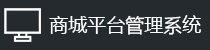
<style>
.page{position:relative;width:210px;height:50px;background:#252a2f}
.page>*{position:absolute;margin:0}
.t1{font:19px "MicrosoftYaHei";color:#ffffff}
</style>
<div class="page">
<p class="t1" style="left:49px;top:15px;width:152px;height:20px">商城平台管理系统</p>
</div>
